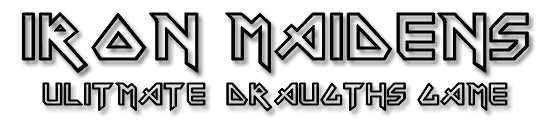
<style>
.page{position:relative;width:550px;height:120px;background:#ffffff}
.page>*{position:absolute;margin:0}
.t1{font:30px "Iron-Maiden";color:#000000}
.t2{font:65px "Iron-Maiden";color:#000000}
</style>
<div class="page">
<p class="t1" style="left:22px;top:12px;width:507px;height:99px;text-align:center"><span class="t2">IRON MAIDENs<br><br></span>ulitmate  draugths game</p>
</div>
